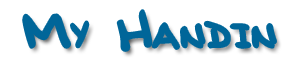
<style>
.page{position:relative;width:298px;height:62px;background:#ffffff}
.page>*{position:absolute;margin:0}
.t1{font:30px "BobbiesHand";color:#006699}
.t2{font:48px "BobbiesHand";color:#006699}
</style>
<div class="page">
<p class="t1" style="left:24px;top:11px;width:251px;height:39px"><span class="t2">M</span>Y<span class="t2"> H</span>ANDIN</p>
</div>
